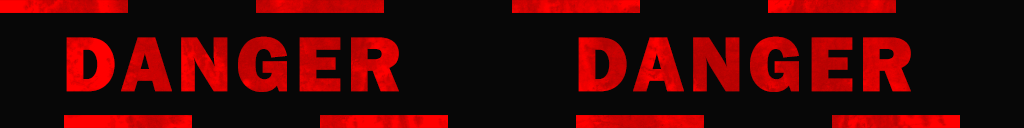
<style>
.page{position:relative;width:1024px;height:128px;background:#070707}
.page>*{position:absolute;margin:0}
.t1{font:80.8px "FranklinGothic-Heavy";letter-spacing:0.05em}
.t2{font:80.8px "FranklinGothic-Heavy";letter-spacing:0.05em;color:#ca0202}
</style>
<div class="page">
<p class="t1" style="left:66px;top:36px;width:333px;height:56px">DANGER</p>
<p class="t2" style="left:578px;top:36px;width:333px;height:56px">DANGER</p>
</div>
